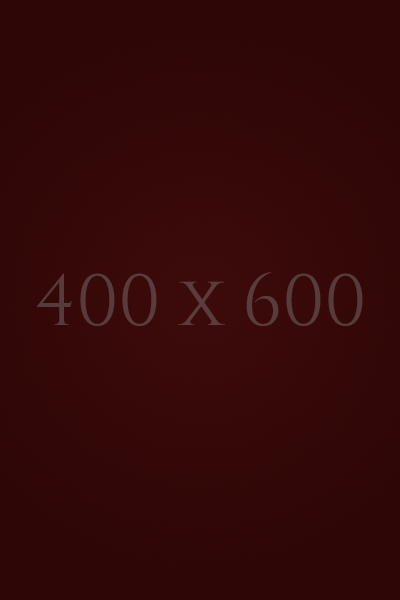
<style>
.page{position:relative;width:400px;height:600px}
.page>*{position:absolute;margin:0}
.t1{font:72px "Cinzel-Regular";color:#573c3c}
</style>
<div class="page">
<p class="t1" style="left:37px;top:272px;width:326px;height:54px">400 x 600</p>
</div>
